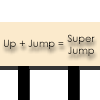
<style>
.page{position:relative;width:100px;height:100px;background:#ffffff}
.page>*{position:absolute;margin:0}
.t1{font:10px "CenturyGothic";color:#000000}
</style>
<div class="page">
<p class="t1" style="left:4px;top:39px;width:60px;height:10px">Up + Jump =</p>
<p class="t1" style="left:67px;top:34px;width:28px;height:22px;text-align:center">Super<br>Jump</p>
</div>
